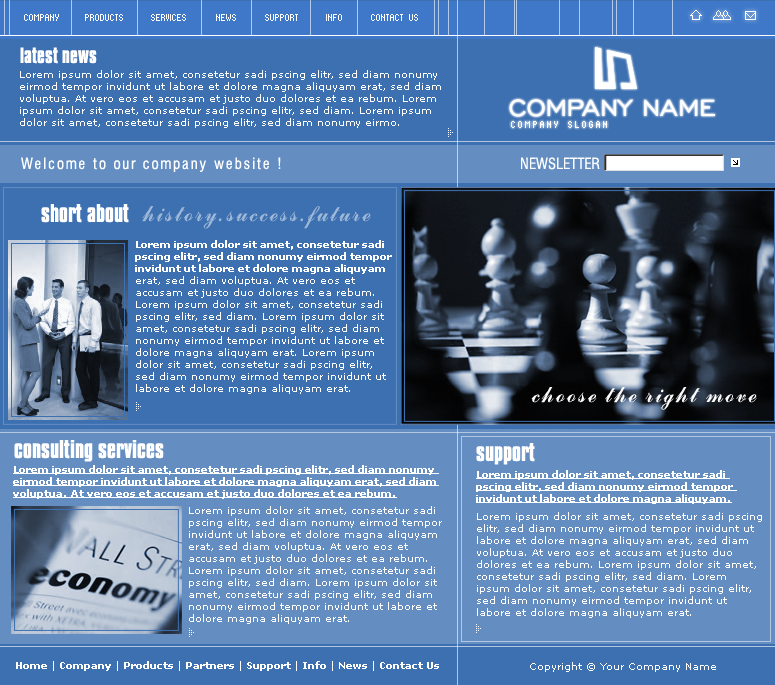
<style>
.page{position:relative;width:775px;height:685px;background:#3d70b1}
.page>*{position:absolute;margin:0}
.t1{font:10px "Supernatural1001";color:#ffffff}
.t2{font:19px "CompactaBT-Bold";color:#ffffff}
.t3{font:10px "Verdana";color:#ffffff}
.t4{font:30px "EngraversGothicBT-Regular";color:#ffffff}
.t5{font:10px "Supernatural1001";letter-spacing:0.2em;color:#ffffff}
.t6{font:15px "Swiss721BT-RomanCondensed";letter-spacing:0.12em;color:#ffffff}
.t7{font:15px "Swiss721BT-RomanCondensed";color:#ffffff}
.t8{font:22px "CompactaBT-Bold";color:#ffffff}
.t9{font:22px "CommercialScrDEE";letter-spacing:0.14em;color:#9eb8d8}
.t10{font:10px "Verdana-Bold";color:#ffffff}
.t11{font:22px "CommercialScrDEE";letter-spacing:0.14em;color:#ffffff}
.t12{font:10px "Verdana-Bold";color:#ffffff;text-decoration:underline}
</style>
<div class="page">
<p class="t1" style="left:24px;top:14px;width:35px;height:7px">COMPANY</p>
<p class="t1" style="left:85px;top:14px;width:38px;height:7px">PRODUCTS</p>
<p class="t1" style="left:151px;top:14px;width:35px;height:7px">SERVICES</p>
<p class="t1" style="left:216px;top:14px;width:20px;height:7px">NEWS</p>
<p class="t1" style="left:265px;top:14px;width:33px;height:7px">SUPPORT</p>
<p class="t1" style="left:326px;top:14px;width:16px;height:7px">INFO</p>
<p class="t1" style="left:371px;top:14px;width:47px;height:7px">CONTACT US</p>
<p class="t2" style="left:20px;top:47px;width:77px;height:17px">latest news</p>
<p class="t3" style="left:20px;top:70px;width:421px;height:58px">Lorem ipsum dolor sit amet, consetetur sadi pscing elitr, sed diam nonumy eirmod tempor invidunt ut labore et dolore magna aliquyam erat, sed diam voluptua. At vero eos et accusam et justo duo dolores et ea rebum. Lorem ipsum dolor sit amet, consetetur sadi pscing elitr, sed diam. Lorem ipsum dolor sit amet, consetetur sadi pscing elitr, sed diam nonumy eirmo.</p>
<p class="t4" style="left:509px;top:99px;width:206px;height:18px">COMPANY NAME</p>
<p class="t5" style="left:511px;top:121px;width:96px;height:7px">COMPANY SLOGAN</p>
<p class="t6" style="left:21px;top:157px;width:260px;height:15px">Welcome to our company website !</p>
<p class="t7" style="left:521px;top:157px;width:79px;height:13px">NEWSLETTER</p>
<p class="t8" style="left:41px;top:204px;width:88px;height:19px">short about</p>
<p class="t9" style="left:142px;top:206px;width:229px;height:23px">history.success.future</p>
<p class="t3" style="left:135px;top:240px;width:257px;height:154px"><span class="t10">Lorem ipsum dolor sit amet, consetetur sadi pscing elitr, sed diam nonumy eirmod tempor invidunt ut labore et dolore magna aliquyam</span> erat, sed diam voluptua. At vero eos et accusam et justo duo dolores et ea rebum. Lorem ipsum dolor sit amet, consetetur sadi pscing elitr, sed diam. Lorem ipsum dolor sit amet, consetetur sadi pscing elitr, sed diam nonumy eirmod tempor invidunt ut labore et dolore magna aliquyam erat. Lorem ipsum dolor sit amet, consetetur sadi pscing elitr, sed diam nonumy eirmod tempor invidunt ut labore et dolore magna aliquyam erat.</p>
<p class="t11" style="left:531px;top:387px;width:226px;height:23px">choose the right move</p>
<p class="t8" style="left:14px;top:440px;width:150px;height:22px">consulting services</p>
<p class="t8" style="left:476px;top:443px;width:59px;height:22px">support</p>
<p class="t12" style="left:13px;top:465px;width:426px;height:34px">Lorem ipsum dolor sit amet, consetetur sadi pscing elitr, sed diam nonumy eirmod tempor invidunt ut labore et dolore magna aliquyam erat, sed diam voluptua. At vero eos et accusam et justo duo dolores et ea rebum.</p>
<p class="t12" style="left:476px;top:470px;width:261px;height:34px">Lorem ipsum dolor sit amet, consetetur sadi pscing elitr, sed diam nonumy eirmod tempor invidunt ut labore et dolore magna aliquyam.</p>
<p class="t3" style="left:189px;top:506px;width:253px;height:118px">Lorem ipsum dolor sit amet, consetetur sadi pscing elitr, sed diam nonumy eirmod tempor invidunt ut labore et dolore magna aliquyam erat, sed diam voluptua. At vero eos et accusam et justo duo dolores et ea rebum. Lorem ipsum dolor sit amet, consetetur sadi pscing elitr, sed diam. Lorem ipsum dolor sit amet, consetetur sadi pscing elitr, sed diam nonumy eirmod tempor invidunt ut labore et dolore magna aliquyam erat.</p>
<p class="t3" style="left:477px;top:512px;width:285px;height:106px">Lorem ipsum dolor sit amet, consetetur sadi pscing elitr, sed diam nonumy eirmod tempor invidunt ut labore et dolore magna aliquyam erat, sed diam voluptua. At vero eos et accusam et justo duo dolores et ea rebum. Lorem ipsum dolor sit amet, consetetur sadi pscing elitr, sed diam. Lorem ipsum dolor sit amet, consetetur sadi pscing elitr, sed diam nonumy eirmod tempor invidunt ut labore et dolore magna aliquyam erat.</p>
<p class="t10" style="left:16px;top:661px;width:423px;height:10px"><span class="t3">  </span>Home | Company | Products | Partners | Support | Info | News | Contact Us</p>
<p class="t3" style="left:530px;top:662px;width:186px;height:10px">Copyright © Your Company Name</p>
</div>
